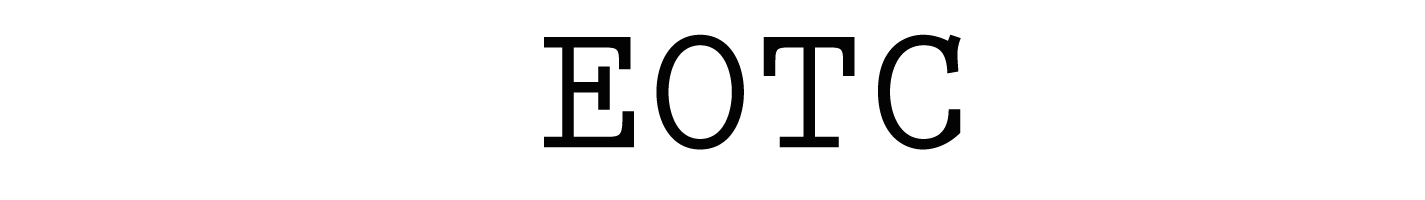
<style>
.page{position:relative;width:1425px;height:200px;background:#ffffff}
.page>*{position:absolute;margin:0}
.t1{font:183.5px "PrestigeEliteStd-Bd";color:#030303}
</style>
<div class="page">
<p class="t1" style="left:544px;top:34px;width:417px;height:116px">EOTC</p>
</div>
